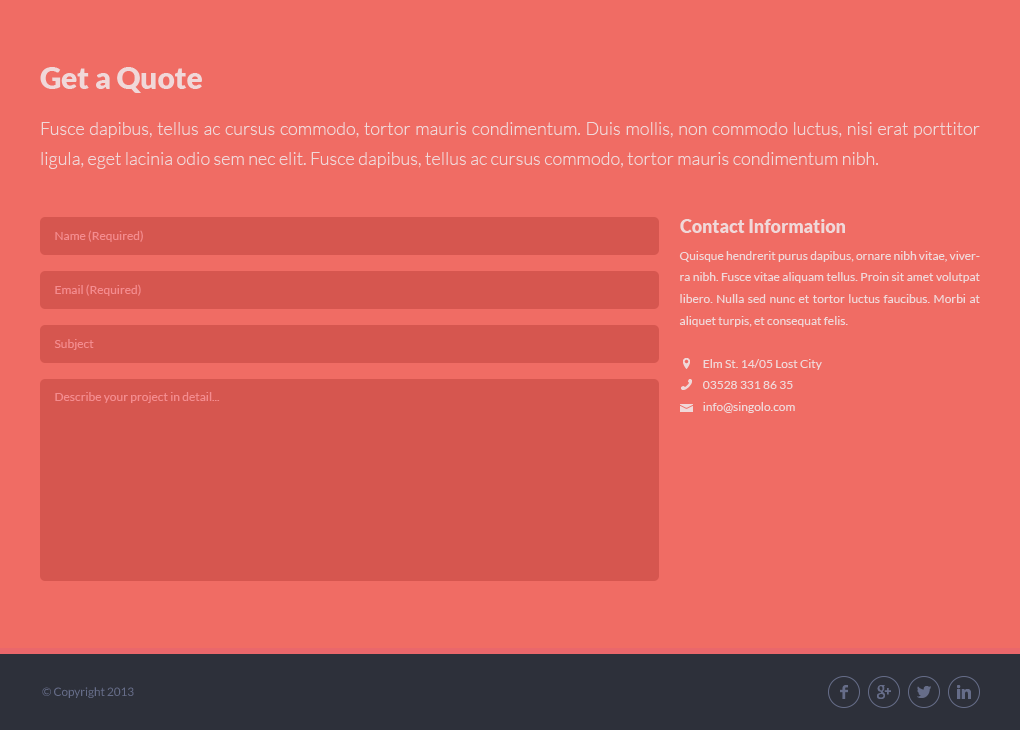
<style>
.page{position:relative;width:1020px;height:730px;background:#f06c64}
.page>*{position:absolute;margin:0}
.t1{font:30px "Lato-Black";color:#f0d8d9}
.t2{font:18px/30px "Lato-Light";color:#f0d8d9}
.t3{font:18px "Lato-Black";color:#f0d8d9}
.t4{font:12px "Lato-Regular";color:#f48c8f}
.t5{font:12px/21.6px "Lato-Regular";color:#f0d8d9}
</style>
<div class="page">
<p class="t1" style="left:40px;top:67px;width:162px;height:26px">Get a Quote</p>
<p class="t2" style="left:41px;top:122px;width:939px;height:47px;text-align:justify">Fusce dapibus, tellus ac cursus commodo, tortor mauris condimentum. Duis mollis, non commodo luctus, nisi erat porttitor ligula, eget lacinia odio sem nec elit. Fusce dapibus, tellus ac cursus commodo, tortor mauris condimentum nibh.</p>
<p class="t3" style="left:680px;top:219px;width:165px;height:14px">Contact Information</p>
<p class="t4" style="left:55px;top:230px;width:88px;height:12px">Name (Required)</p>
<p class="t5" style="left:679px;top:251px;width:301px;height:162px;text-align:justify">Quisque hendrerit purus dapibus, ornare nibh vitae, viverra nibh. Fusce vitae aliquam tellus. Proin sit amet volutpat libero. Nulla sed nunc et tortor luctus faucibus. Morbi at aliquet turpis, et consequat felis. <br><br>          Elm St. 14/05 Lost City <br>          03528 331 86 35 <br>          info@singolo.com</p>
<p class="t4" style="left:55px;top:284px;width:86px;height:12px">Email (Required)</p>
<p class="t4" style="left:54px;top:339px;width:40px;height:11px">Subject</p>
<p class="t4" style="left:55px;top:392px;width:165px;height:11px">Describe your project in detail...</p>
</div>
